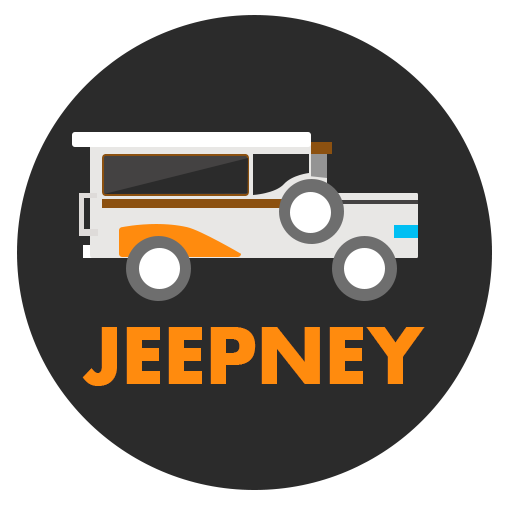
<style>
.page{position:relative;width:506px;height:505px;background:#2b2b2b}
.page>*{position:absolute;margin:0}
.t1{font:76.2px "FuturaLT-Bold";color:#ff8b0e;text-transform:uppercase}
</style>
<div class="page">
<p class="t1" style="left:82px;top:327px;width:343px;height:59px">JEEPney</p>
</div>
